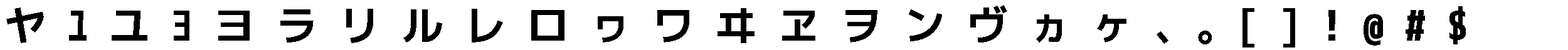
<style>
.page{position:relative;width:1568px;height:50px;background:#ffffff}
.page>*{position:absolute;margin:0}
.t1{font:41.8px "mplus-1mn-bold";color:#000000}
</style>
<div class="page">
<p class="t1" style="left:6px;top:5px;width:1460px;height:43px">ヤ ﾕ ユ ﾖ ヨ ラ リ ル レ ロ ヮ ワ ヰ ヱ ヲ ン ヴ ヵ ヶ 、。[ ] ! @ # $</p>
</div>
